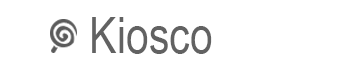
<style>
.page{position:relative;width:353px;height:72px;background:#ffffff}
.page>*{position:absolute;margin:0}
.t1{font:50px "ArialNarrow";color:#626262}
</style>
<div class="page">
<p class="t1" style="left:92px;top:17px;width:120px;height:37px">Kiosco</p>
</div>
